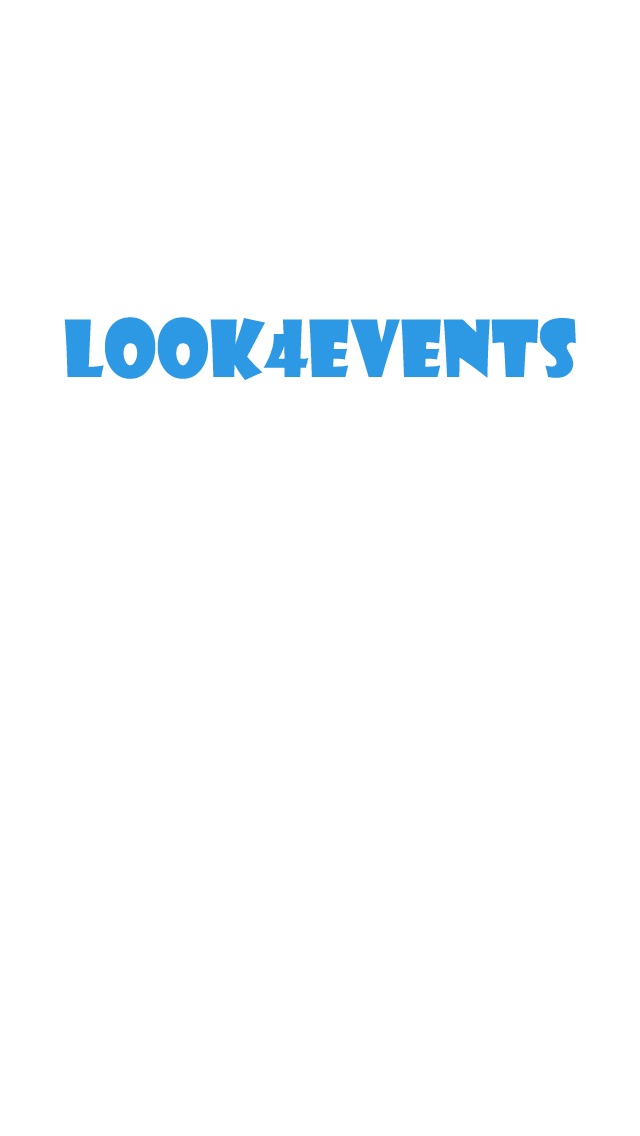
<style>
.page{position:relative;width:640px;height:1136px;background:#ffffff}
.page>*{position:absolute;margin:0}
.t1{font:76.2px "ShowcardGothic-Reg";color:#2d99e4}
</style>
<div class="page">
<p class="t1" style="left:64px;top:317px;width:512px;height:63px">look4events</p>
</div>
